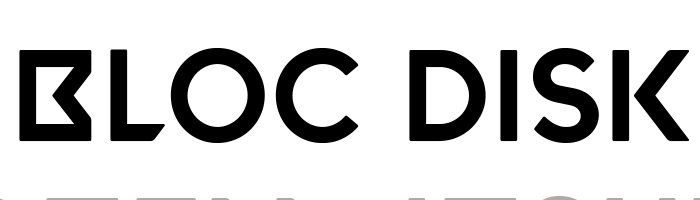
<style>
.page{position:relative;width:700px;height:200px;background:#ffffff}
.page>*{position:absolute;margin:0}
.t1{font:130px "VALORANT-Regular";color:#000000}
</style>
<div class="page">
<p class="t1" style="left:19px;top:48px;width:671px;height:95px">Bloc Disk</p>
</div>
